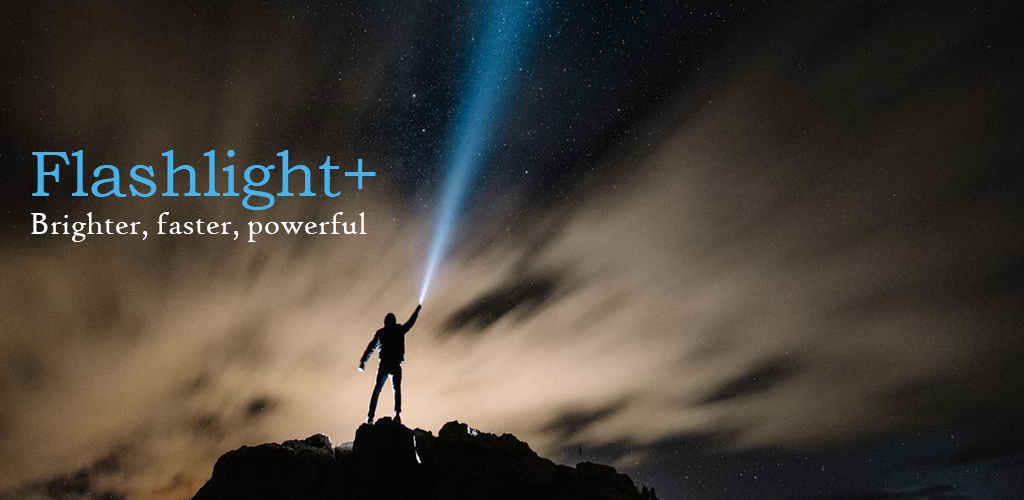
<style>
.page{position:relative;width:1024px;height:500px}
.page>*{position:absolute;margin:0}
.t1{font:32px "HighTowerText-Reg";color:#ffffff}
.t2{font:64px "BookmanOldStyle";color:#49b2e9}
</style>
<div class="page">
<p class="t1" style="left:31px;top:150px;width:345px;height:92px"><span class="t2">Flashlight+<br></span>Brighter, faster, powerful</p>
</div>
